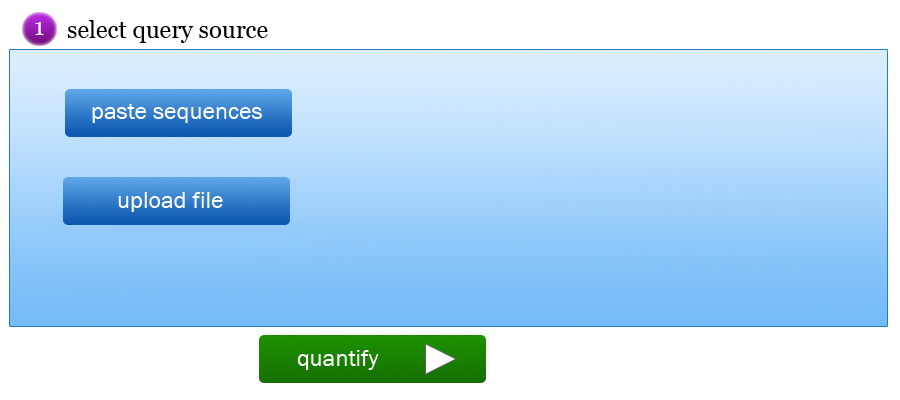
<style>
.page{position:relative;width:900px;height:400px;background:#ffffff}
.page>*{position:absolute;margin:0}
.t1{font:24px "Georgia";color:#000000}
.t2{font:24px "FranklinGothic-Book";color:#ffffff}
</style>
<div class="page">
<p class="t1" style="left:67px;top:20px;width:201px;height:23px">select query source</p>
<p class="t2" style="left:92px;top:104px;width:170px;height:19px">paste sequences</p>
<p class="t2" style="left:118px;top:192px;width:105px;height:20px">upload file</p>
<p class="t2" style="left:297px;top:350px;width:82px;height:20px">quantify</p>
</div>
